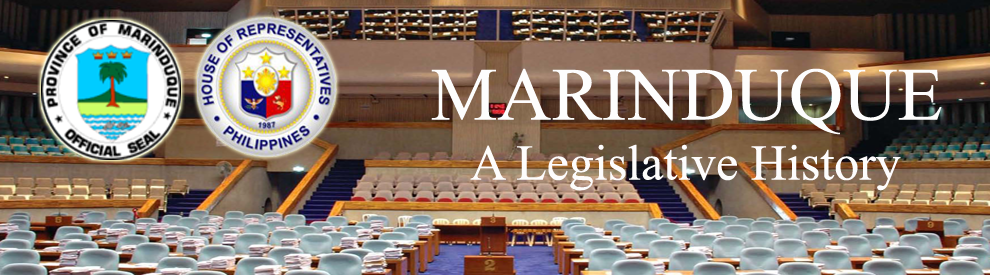
<style>
.page{position:relative;width:990px;height:275px}
.page>*{position:absolute;margin:0}
.t1{font:50px "TimesNewRomanPSMT";color:#fdfcfc}
.t2{font:75px "TimesNewRomanPSMT";color:#fdfdfd}
</style>
<div class="page">
<p class="t1" style="left:431px;top:68px;width:511px;height:123px;text-align:center"><span class="t2">MARINDUQUE<br></span>A Legislative History</p>
</div>
